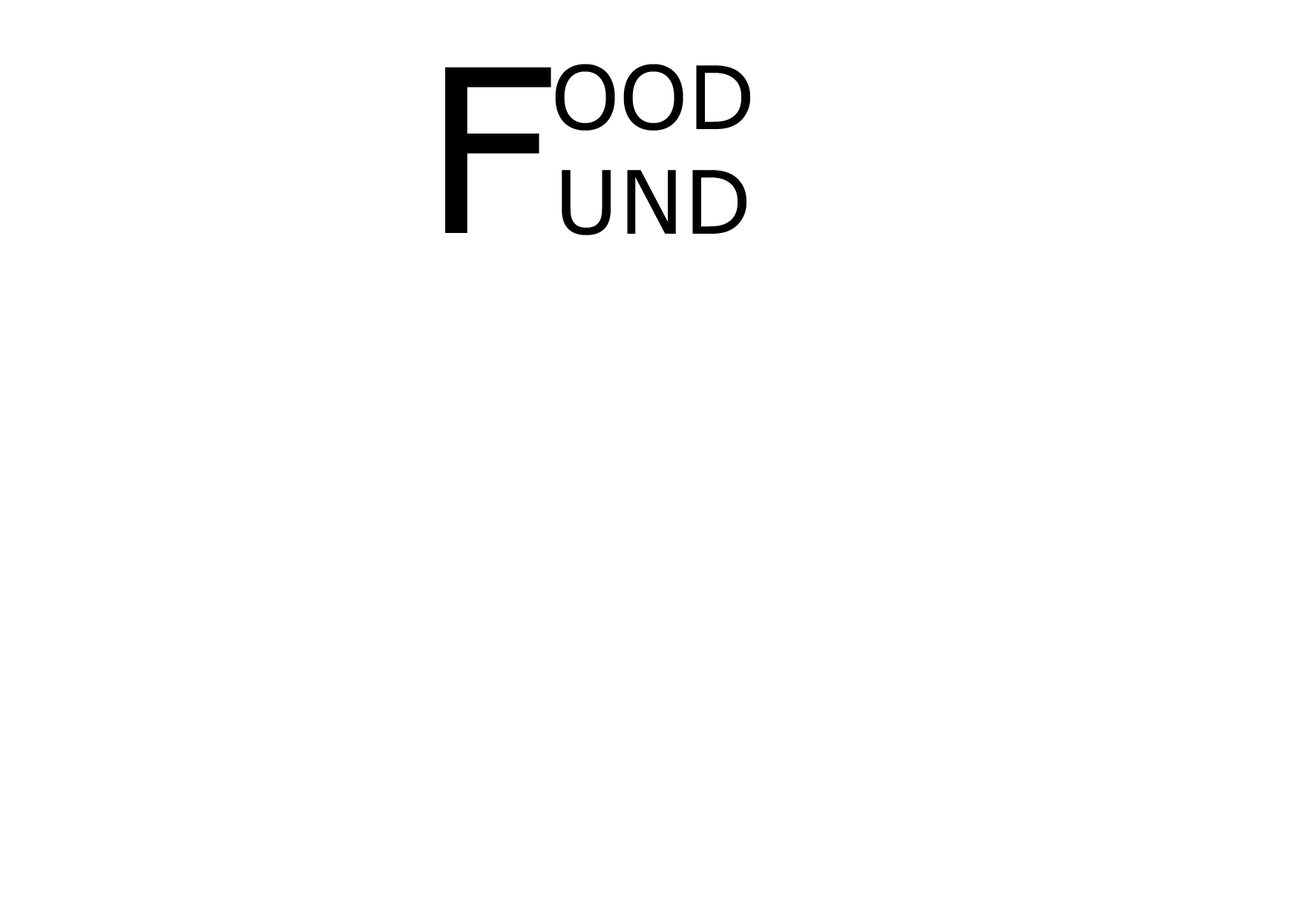
<style>
.page{position:relative;width:1297px;height:920px;background:#ffffff}
.page>*{position:absolute;margin:0}
.t1{font:87.6px "Verdana";color:#000000}
.t2{font:227.8px "Verdana";color:#000000}
</style>
<div class="page">
<p class="t1" style="left:555px;top:64px;width:196px;height:171px;text-align:center">OOD<br>UND</p>
<p class="t2" style="left:445px;top:67px;width:106px;height:166px">F</p>
</div>
